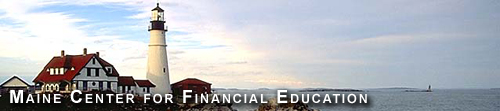
<style>
.page{position:relative;width:500px;height:111px}
.page>*{position:absolute;margin:0}
.t1{font:17.1px "Arial-BoldMT";letter-spacing:0.1em;color:#ffffff;font-variant:small-caps}
</style>
<div class="page">
<p class="t1" style="left:10px;top:89px;width:357px;height:15px">Maine Center for Financial Education</p>
</div>
